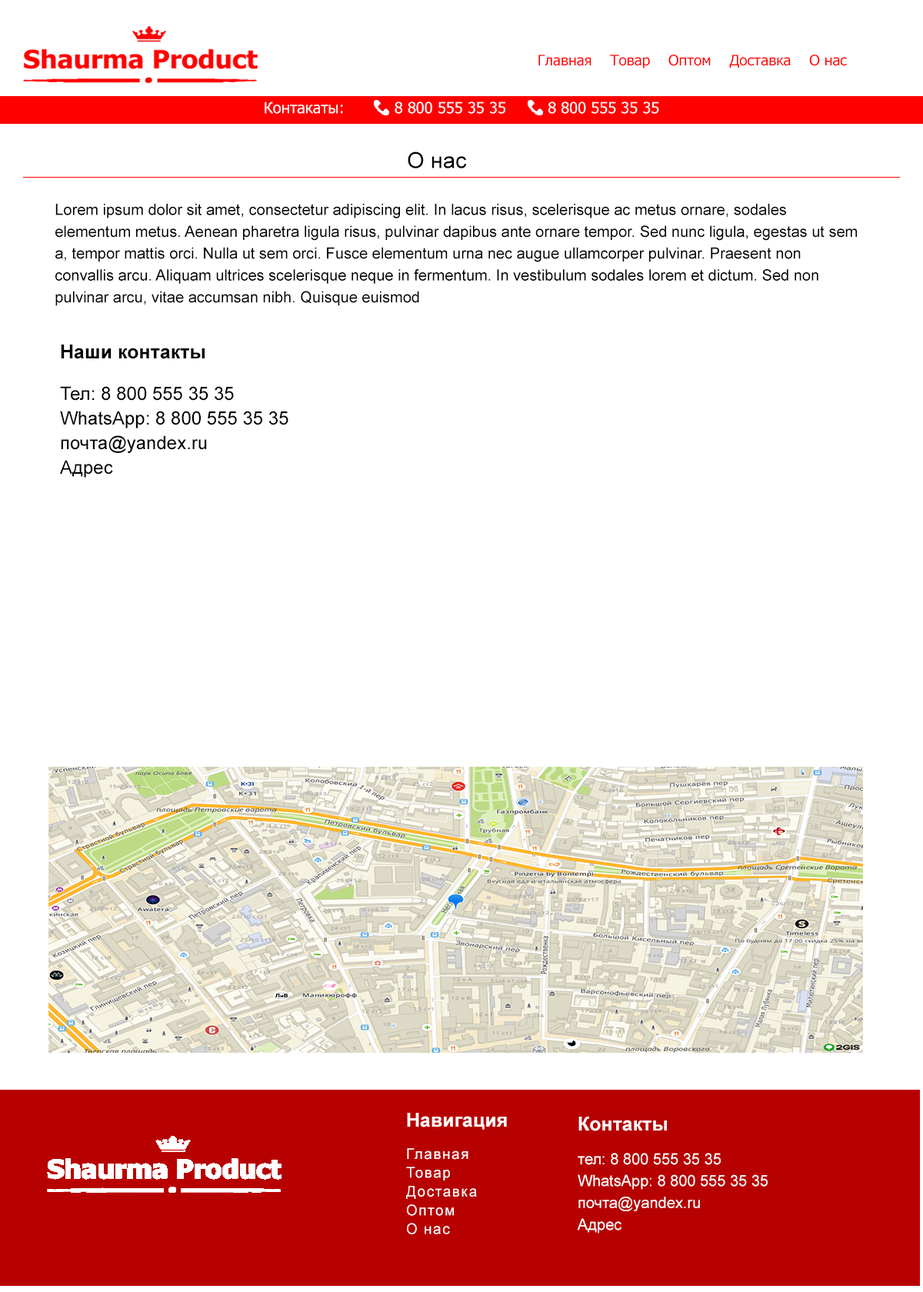
<style>
.page{position:relative;width:923px;height:1292px;background:#ffffff}
.page>*{position:absolute;margin:0}
.t1{font:14.6px "Tahoma";color:#fe0000}
.t2{font:15.4px "Tahoma";color:#ffffff}
.t3{font:22.3px "ArialMT";color:#000000}
.t4{font:15.4px/21.8px "ArialMT";color:#000000}
.t5{font:18.5px/24.6px "ArialMT";color:#000000}
.t6{font:19.2px/16.9px "Arial-BoldMT";color:#000000}
.t7{font:14.6px/18.8px "ArialMT";letter-spacing:0.08em;color:#ffffff}
.t8{font:19.2px/16.2px "Arial-BoldMT";color:#ffffff}
.t9{font:14.6px/16.2px "ArialMT";letter-spacing:0.08em;color:#ffffff}
.t10{font:15.4px/21.8px "ArialMT";color:#ffffff}
.t11{font:19.2px/16.9px "Arial-BoldMT";color:#ffffff}
.t12{font:15.4px/16.9px "ArialMT";color:#ffffff}
</style>
<div class="page">
<p class="t1" style="left:538px;top:55px;width:309px;height:13px">Главная    Товар    Оптом    Доставка    О нас</p>
<p class="t2" style="left:265px;top:102px;width:394px;height:12px">Контакаты:           8 800 555 35 35         8 800 555 35 35</p>
<p class="t3" style="left:408px;top:152px;width:59px;height:16px">О нас</p>
<p class="t4" style="left:55px;top:204px;width:802px;height:102px">Lorem ipsum dolor sit amet, consectetur adipiscing elit. In lacus risus, scelerisque ac metus ornare, sodales elementum metus. Aenean pharetra ligula risus, pulvinar dapibus ante ornare tempor. Sed nunc ligula, egestas ut sem a, tempor mattis orci. Nulla ut sem orci. Fusce elementum urna nec augue ullamcorper pulvinar. Praesent non convallis arcu. Aliquam ultrices scelerisque neque in fermentum. In vestibulum sodales lorem et dictum. Sed non pulvinar arcu, vitae accumsan nibh. Quisque euismod</p>
<p class="t5" style="left:60px;top:345px;width:228px;height:133px"><span class="t6">Наши контакты<br><br></span>Тел: 8 800 555 35 35<br>WhatsApp: 8 800 555 35 35<br>почта@yandex.ru<br>Адрес</p>
<p class="t7" style="left:406px;top:1113px;width:101px;height:121px"><span class="t8">Навигация<br><br></span><span class="t9">Главная<br></span>Товар <br>Доставка<br>Оптом<br>О нас</p>
<p class="t10" style="left:577px;top:1117px;width:191px;height:117px"><span class="t11">Контакты<br><br></span><span class="t12">тел: 8 800 555 35 35<br></span>WhatsApp: 8 800 555 35 35<br>почта@yandex.ru<br>Адрес</p>
</div>
